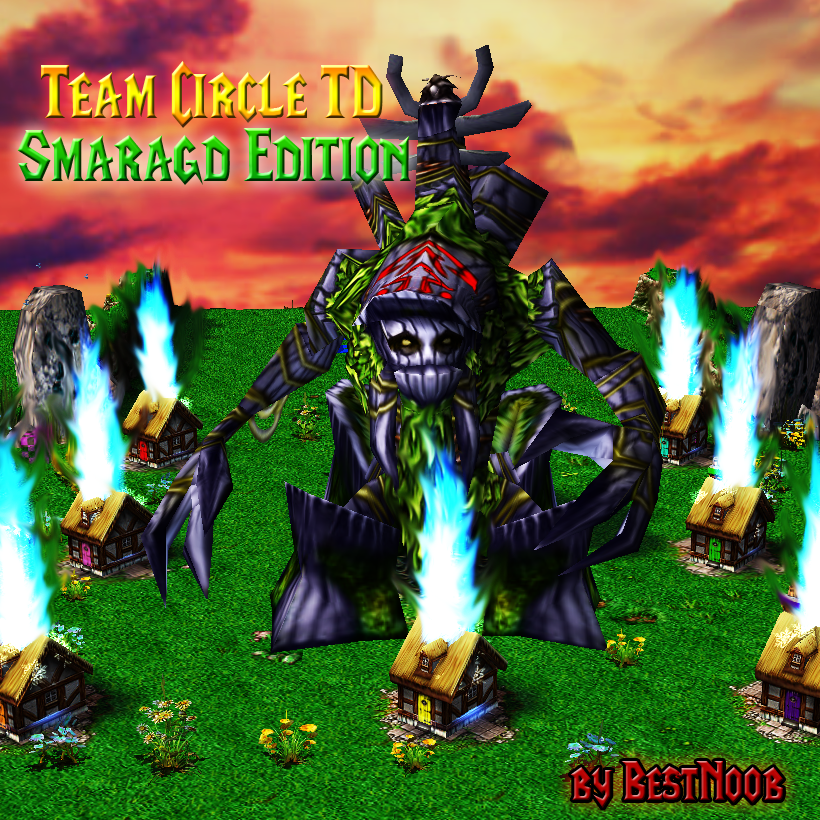
<style>
.page{position:relative;width:820px;height:820px}
.page>*{position:absolute;margin:0}
.t1{font:76.4px "LifeCraft";scale:0.89 1}
.t2{font:54.5px "LifeCraft";scale:0.89 1}
</style>
<div class="page">
<p class="t1" style="left:41px;top:61px;width:342px;height:67px">Team Circle TD</p>
<p class="t1" style="left:17px;top:128px;width:394px;height:57px">Smaragd Edition</p>
<p class="t2" style="left:570px;top:761px;width:214px;height:47px">by BestNoob</p>
</div>
